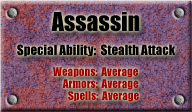
<style>
.page{position:relative;width:192px;height:112px}
.page>*{position:absolute;margin:0}
.t1{font:24px "Impact";color:#000000}
.t2{font:13px "Impact";color:#000000}
.t3{font:11px "Impact";color:#9c0000}
</style>
<div class="page">
<p class="t1" style="left:51px;top:12px;width:89px;height:20px">Assassin</p>
<p class="t2" style="left:17px;top:44px;width:158px;height:13px">Special Ability:  Stealth Attack</p>
<p class="t3" style="left:53px;top:67px;width:85px;height:11px">Weapons:  Average</p>
<p class="t3" style="left:62px;top:79px;width:77px;height:11px">Armors:  Average</p>
<p class="t3" style="left:68px;top:91px;width:71px;height:11px">Spells:  Average</p>
</div>
